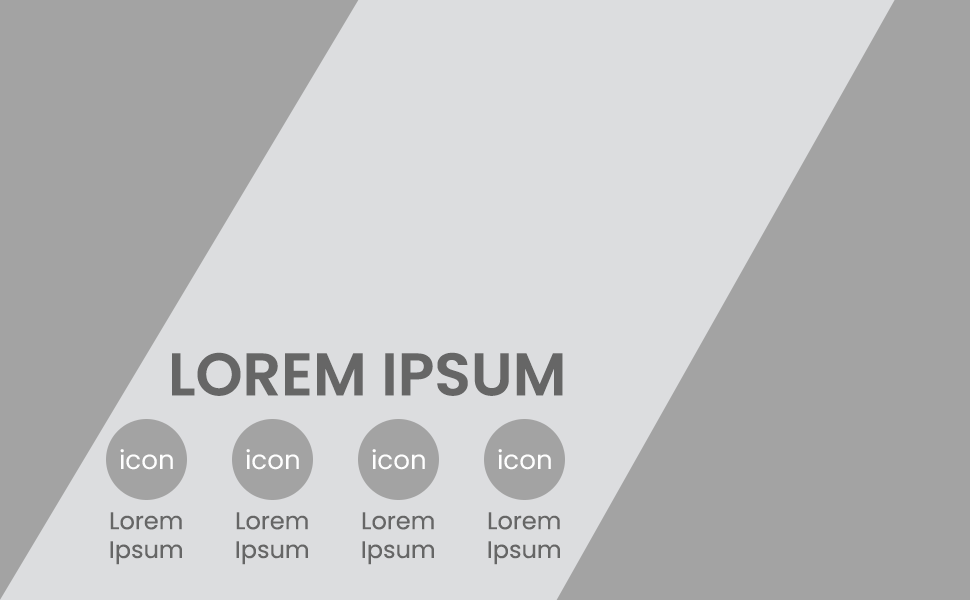
<style>
.page{position:relative;width:970px;height:600px;background:#dcdddf}
.page>*{position:absolute;margin:0}
.t1{font:60px "Poppins-SemiBold";color:#666666;text-transform:uppercase}
.t2{font:26.1px "Poppins-Regular";color:#ffffff}
.t3{font:24px "Poppins-Regular";color:#666666}
</style>
<div class="page">
<p class="t1" style="left:172px;top:352px;width:391px;height:44px">LOREM IPSUM</p>
<p class="t2" style="left:120px;top:449px;width:53px;height:21px">icon</p>
<p class="t2" style="left:246px;top:449px;width:53px;height:21px">icon</p>
<p class="t2" style="left:372px;top:449px;width:53px;height:21px">icon</p>
<p class="t2" style="left:498px;top:449px;width:53px;height:21px">icon</p>
<p class="t3" style="left:110px;top:512px;width:72px;height:53px;text-align:center">Lorem<br>Ipsum</p>
<p class="t3" style="left:236px;top:512px;width:72px;height:53px;text-align:center">Lorem<br>Ipsum</p>
<p class="t3" style="left:362px;top:512px;width:72px;height:53px;text-align:center">Lorem<br>Ipsum</p>
<p class="t3" style="left:488px;top:512px;width:72px;height:53px;text-align:center">Lorem<br>Ipsum</p>
</div>
